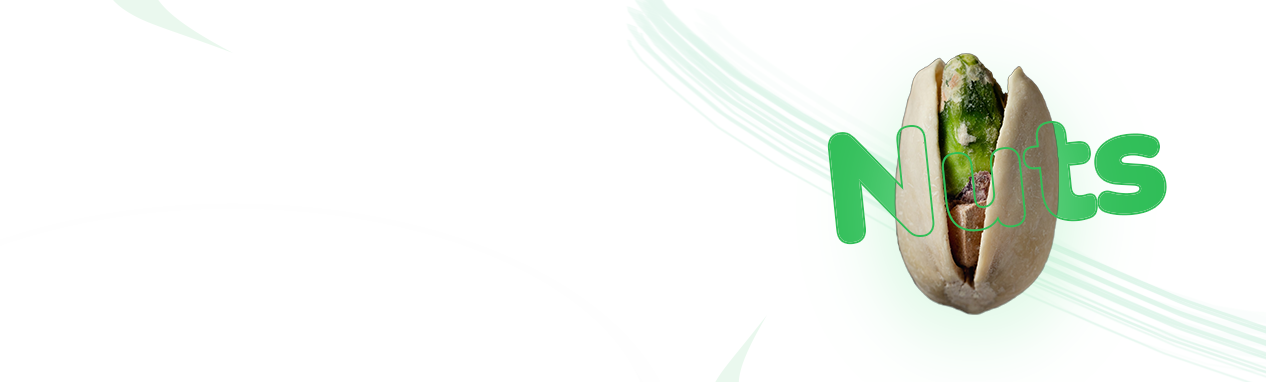
<style>
.page{position:relative;width:1266px;height:382px;background:#ffffff}
.page>*{position:absolute;margin:0}
.t1{font:150px "Nunito-Black"}
</style>
<div class="page">
<p class="t1" style="left:829px;top:123px;width:336px;height:120px;rotate:-6deg">Nuts</p>
<p class="t1" style="left:829px;top:123px;width:336px;height:120px;rotate:-6deg">Nuts</p>
</div>
